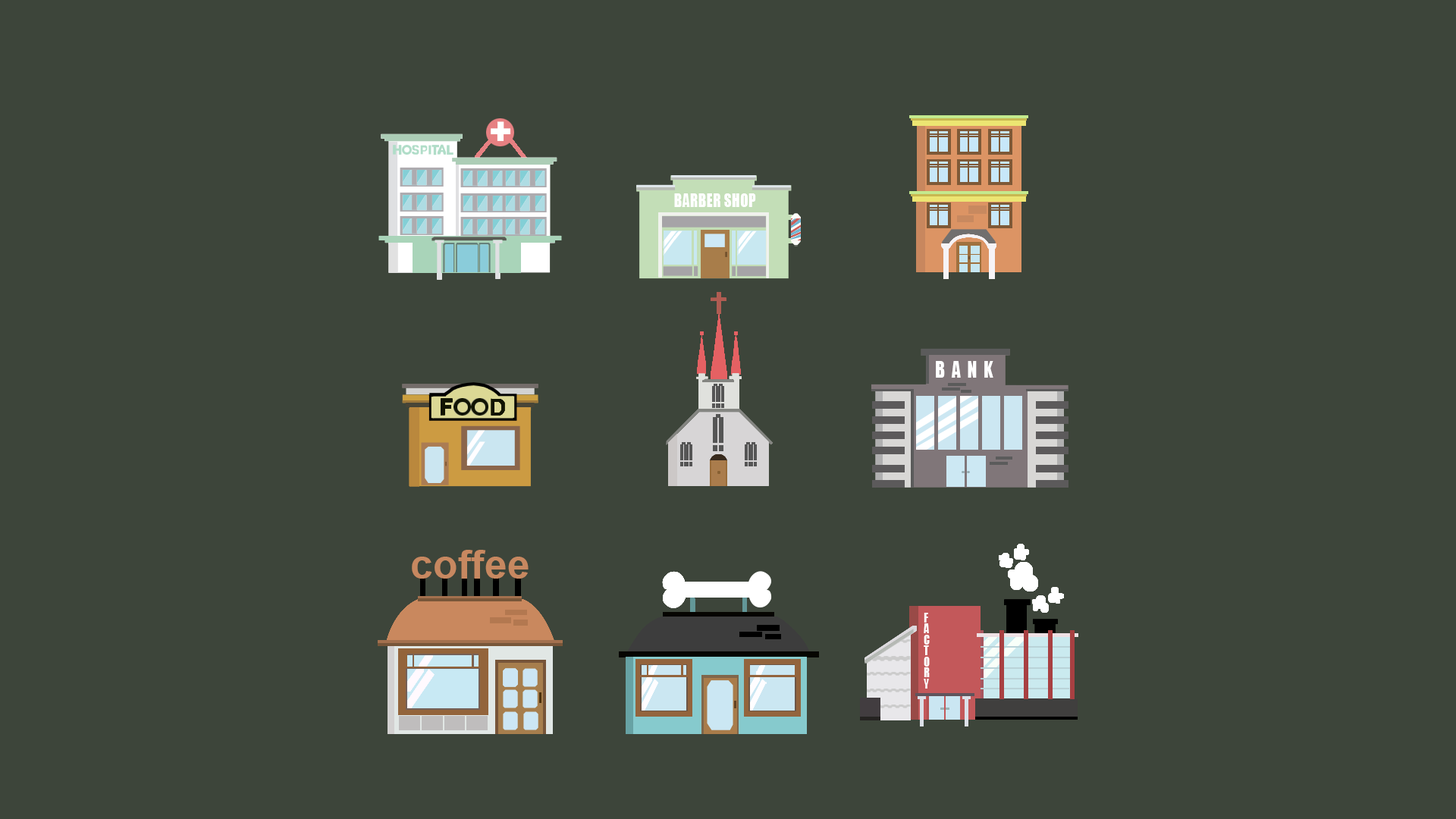
<style>
.page{position:relative;width:1456px;height:819px;background:#3d453a}
.page>*{position:absolute;margin:0}
.t1{font:17.7px "Impact";letter-spacing:0.02em;color:#ffffff;text-transform:uppercase;scale:0.82 1}
.t2{font:21.5px "Impact";letter-spacing:0.38em;color:#ffffff;text-transform:uppercase;scale:0.82 1}
.t3{font:40.5px "Arial-BoldMT";color:#c78860}
.t4{font:12.4px/10.9px "Impact";color:#ffffff;text-transform:uppercase;scale:0.85 1}
</style>
<div class="page">
<p class="t1" style="left:674px;top:193px;width:82px;height:14px">BARBER SHOP</p>
<p class="t2" style="left:936px;top:361px;width:57px;height:17px">BANK</p>
<p class="t3" style="left:412px;top:550px;width:117px;height:29px">coffee</p>
<p class="t4" style="left:924px;top:613px;width:6px;height:76px">f<br>a<br>c<br>t<br>o<br>r<br>y</p>
</div>
